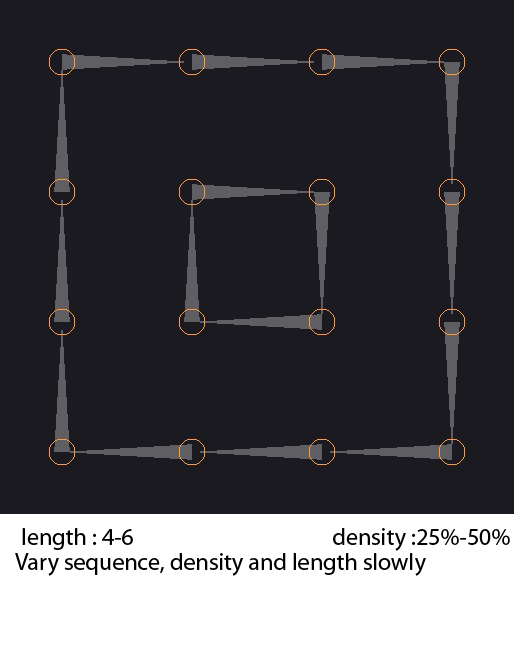
<style>
.page{position:relative;width:514px;height:648px;background:#1b1a20}
.page>*{position:absolute;margin:0}
.t1{font:24px "MyriadPro-Regular";color:#000000}
</style>
<div class="page">
<p class="t1" style="left:22px;top:528px;width:488px;height:23px">length : 4-6                                       density :25%-50%</p>
<p class="t1" style="left:15px;top:553px;width:411px;height:23px">Vary sequence, density and length slowly</p>
</div>
